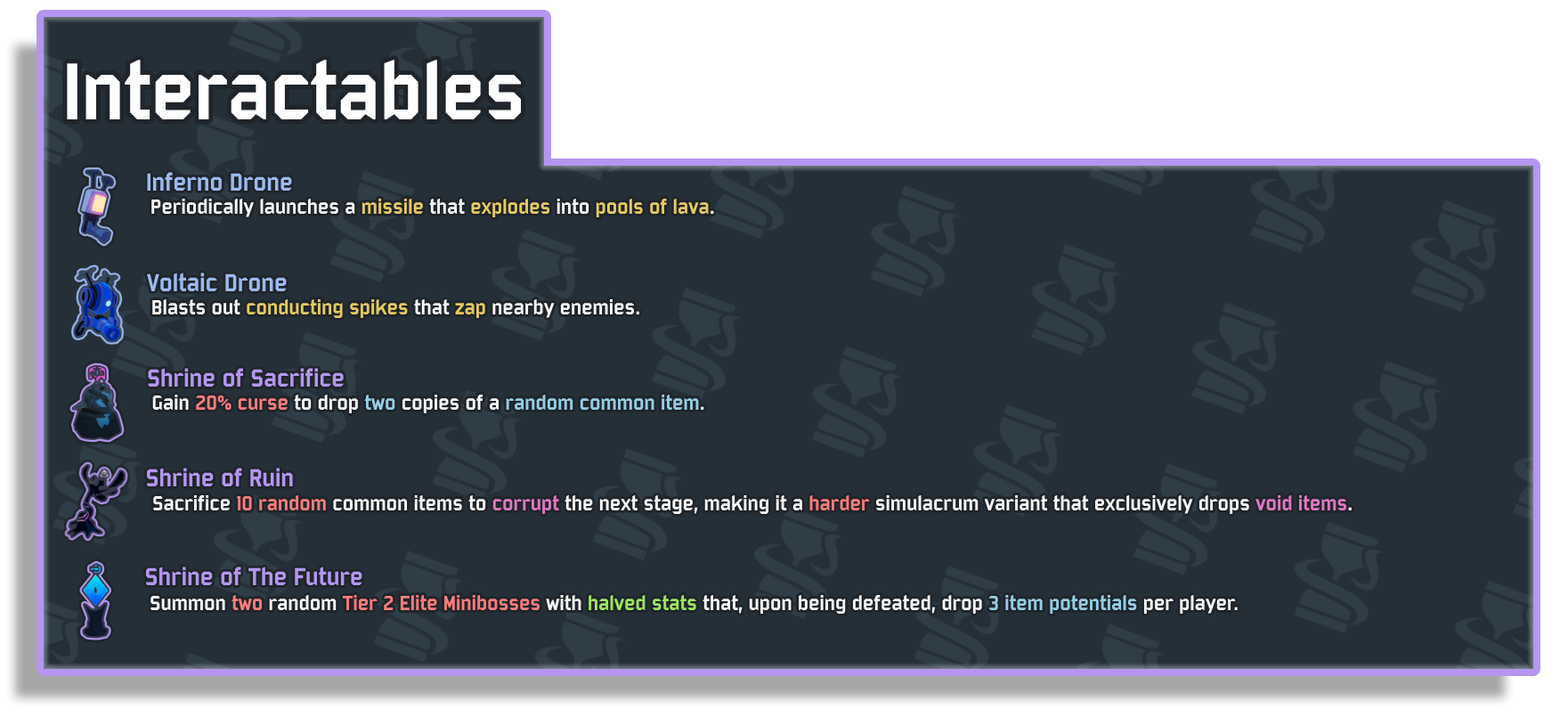
<style>
.page{position:relative;width:1568px;height:709px;background:#252f38}
.page>*{position:absolute;margin:0}
.t1{font:87.3px "Bombardier";color:#ffffff}
.t2{font:26.7px "Bombardier";color:#9cb9ef}
.t3{font:22.3px "Bombardier";color:#f7f7f7}
.t4{font:22.3px "Bombardier";color:#e5c962}
.t5{font:26.7px "Bombardier";color:#b496f0}
.t6{font:22.3px "Bombardier";color:#95cde5}
.t7{font:22.3px "Bombardier";color:#fe7c7c}
.t8{font:22.3px "Bombardier";color:#df78c1}
.t9{font:22.3px "Bombardier";color:#9ce562}
</style>
<div class="page">
<p class="t1" style="left:67px;top:60px;width:454px;height:59px">Interactables</p>
<p class="t2" style="left:147px;top:172px;width:145px;height:19px">Inferno Drone</p>
<p class="t3" style="left:151px;top:199px;width:563px;height:18px">Periodically launches a <span class="t4">missile</span> that <span class="t4">explodes</span> into <span class="t4">pools of lava</span>.</p>
<p class="t2" style="left:147px;top:272px;width:140px;height:19px">Voltaic Drone</p>
<p class="t4" style="left:152px;top:299px;width:487px;height:19px"><span class="t3">Blasts out </span>conducting spikes<span class="t3"> that </span>zap <span class="t3">nearby enemies.</span></p>
<p class="t5" style="left:148px;top:368px;width:196px;height:18px">Shrine of Sacrifice</p>
<p class="t6" style="left:152px;top:394px;width:552px;height:19px"><span class="t3">Gain </span><span class="t7">20% curse </span><span class="t3">to drop </span>two<span class="t3"> copies of a </span>random common item<span class="t3">.</span></p>
<p class="t5" style="left:147px;top:467px;width:146px;height:20px">Shrine of Ruin</p>
<p class="t3" style="left:153px;top:495px;width:1199px;height:20px">Sacrifice <span class="t7">10 random </span>common items to <span class="t8">corrupt</span> the next stage, making it a <span class="t7">harder </span>simulacrum variant that exclusively drops <span class="t8">void items</span>.</p>
<p class="t5" style="left:145px;top:566px;width:217px;height:19px">Shrine of The Future</p>
<p class="t3" style="left:150px;top:595px;width:1088px;height:19px">Summon <span class="t7">two</span> random <span class="t7">Tier 2 Elite Minibosses</span> with <span class="t9">halved stats</span> that, upon being defeated, drop <span class="t6">3 item potentials</span> per player.</p>
</div>
